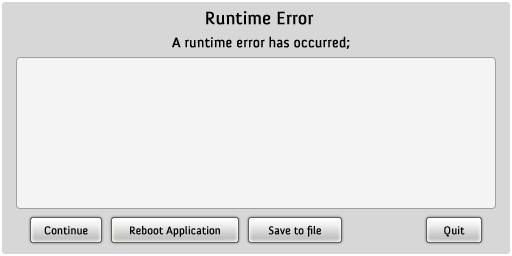
<style>
.page{position:relative;width:512px;height:256px;background:#f4f4f4}
.page>*{position:absolute;margin:0}
.t1{font:18px "Anivers-Regular";color:#000000;font-weight:bold}
.t2{font:14px "Anivers-Regular";color:#000000;font-weight:bold}
.t3{font:11px "Anivers-Regular";color:#000000;font-weight:bold}
</style>
<div class="page">
<p class="t1" style="left:206px;top:11px;width:108px;height:14px">Runtime Error</p>
<p class="t2" style="left:172px;top:36px;width:178px;height:13px">A runtime error has occurred;</p>
<p class="t3" style="left:44px;top:226px;width:44px;height:9px">Continue</p>
<p class="t3" style="left:130px;top:225px;width:90px;height:12px">Reboot Application</p>
<p class="t3" style="left:268px;top:225px;width:53px;height:12px">Save to file</p>
<p class="t3" style="left:444px;top:226px;width:21px;height:11px">Quit</p>
</div>
